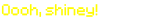
<style>
.page{position:relative;width:168px;height:20px;background:#ffffff}
.page>*{position:absolute;margin:0}
.t1{font:12.5px "Minecraftia-Regular";color:#fffb00}
</style>
<div class="page">
<p class="t1" style="left:1px;top:4px;width:97px;height:13px">Oooh, shiney!</p>
</div>
